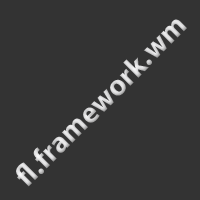
<style>
.page{position:relative;width:200px;height:200px;background:#333333}
.page>*{position:absolute;margin:0}
.t1{font:30px "MyriadPro-Bold";color:#d9d9da}
</style>
<div class="page">
<p class="t1" style="left:16px;top:19px;width:171px;height:168px;rotate:-45deg">fl.framework.wm</p>
</div>
